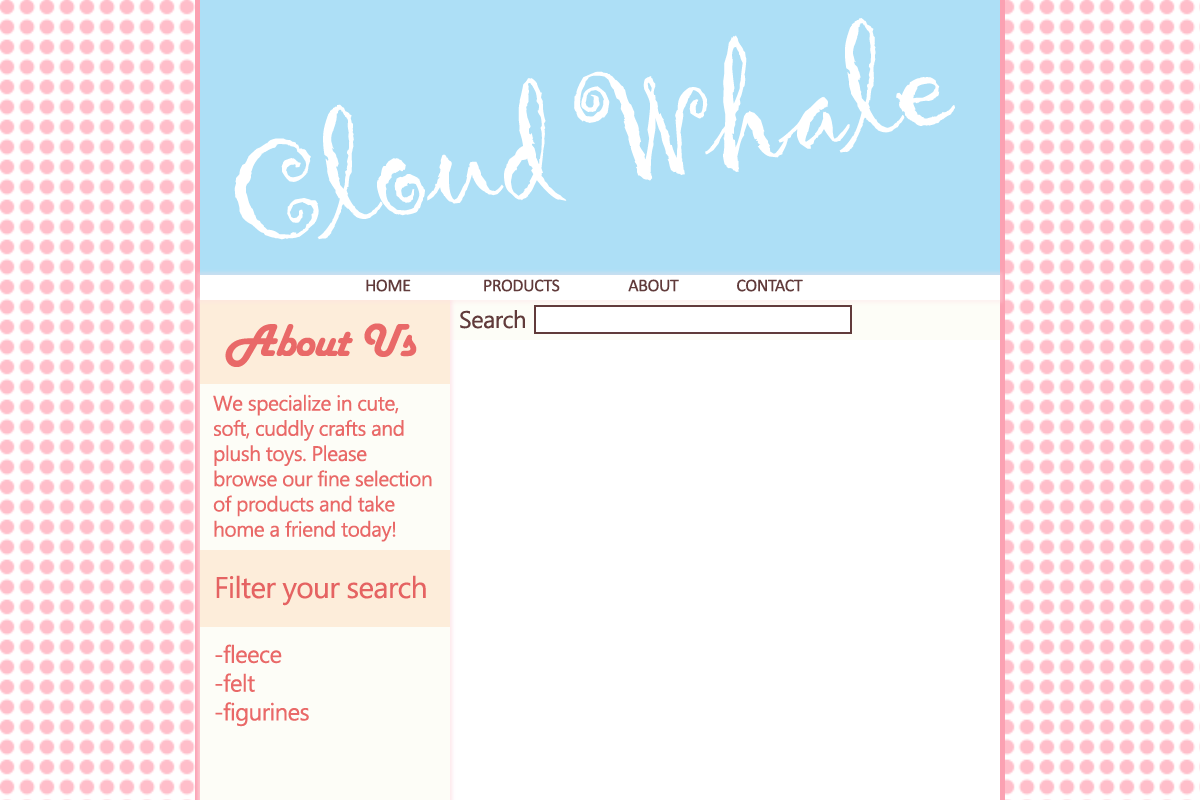
<style>
.page{position:relative;width:1200px;height:800px;background:#ffffff}
.page>*{position:absolute;margin:0}
.t1{font:150px "Gigi-Regular";letter-spacing:-0.025em;color:#ffffff}
.t2{font:18px "Calibri";letter-spacing:-0.025em;color:#613b3b}
.t3{font:14px "Calibri";letter-spacing:-0.025em;color:#613b3b}
.t4{font:24px "Ebrima";letter-spacing:-0.025em;color:#613b3b}
.t5{font:48px "HarlowSolid";letter-spacing:-0.025em;color:#e96968}
.t6{font:21px "Ebrima";letter-spacing:-0.025em;color:#e96968}
.t7{font:30px "Ebrima";letter-spacing:-0.025em;color:#e56362}
.t8{font:24px "Ebrima";letter-spacing:-0.025em;color:#e96968}
</style>
<div class="page">
<p class="t1" style="left:234px;top:18px;width:721px;height:222px;rotate:-9deg">Cloud Whale</p>
<p class="t2" style="left:366px;top:279px;width:437px;height:13px"><span class="t3">                                                                                                 </span>HOME                    PRODUCTS                   ABOUT                CONTACT</p>
<p class="t4" style="left:460px;top:310px;width:65px;height:19px">Search</p>
<p class="t5" style="left:225px;top:323px;width:192px;height:44px">About Us</p>
<p class="t6" style="left:213px;top:394px;width:219px;height:148px">We specialize in cute, soft, cuddly crafts and plush toys. Please browse our fine selection of products and take home a friend today!</p>
<p class="t7" style="left:216px;top:575px;width:210px;height:31px">Filter your search</p>
<p class="t8" style="left:215px;top:644px;width:94px;height:83px">-fleece<br>-felt<br>-figurines</p>
</div>
